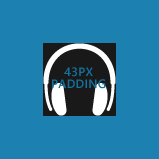
<style>
.page{position:relative;width:159px;height:159px;background:#1c80b0}
.page>*{position:absolute;margin:0}
.t1{font:12px/12px "SegoeWP-Semibold";letter-spacing:0.025em;color:#1372a0;text-transform:uppercase}
</style>
<div class="page">
<p class="t1" style="left:52px;top:67px;width:54px;height:22px;text-align:center">43px<br>padding</p>
</div>
